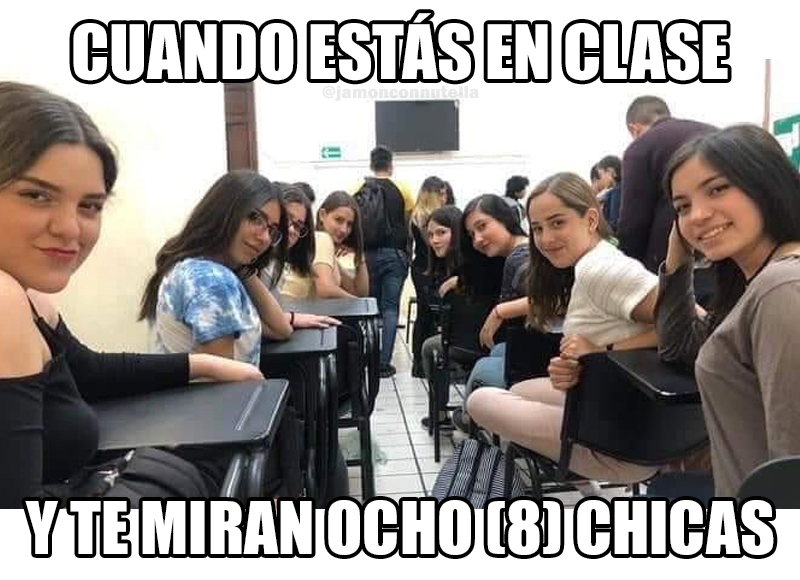
<style>
.page{position:relative;width:800px;height:580px;background:#ffffff}
.page>*{position:absolute;margin:0}
.t1{font:69.2px "Impact";color:#ffffff}
.t2{font:18.1px "FranklinGothic-Heavy";color:#e9e9e9}
.t3{font:67px "Impact";color:#ffffff}
</style>
<div class="page">
<p class="t1" style="left:73px;top:13px;width:655px;height:68px">CUANDO ESTÁS EN CLASE</p>
<p class="t2" style="left:322px;top:85px;width:157px;height:16px">@jamonconnutella</p>
<p class="t3" style="left:25px;top:500px;width:749px;height:55px">Y TE MIRAN OCHO (8) CHICAS</p>
</div>
